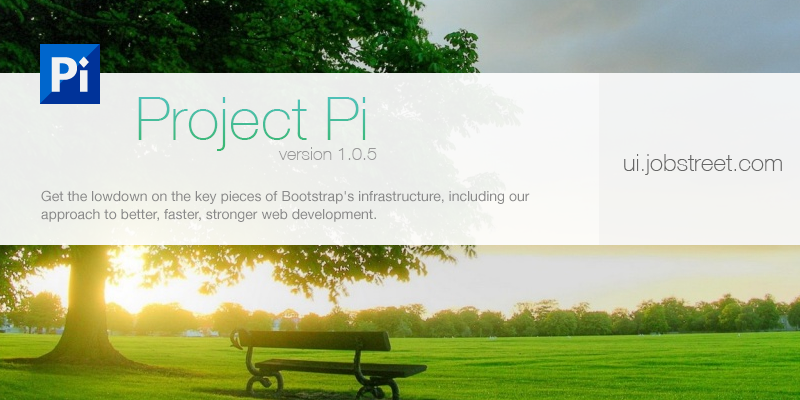
<style>
.page{position:relative;width:800px;height:400px}
.page>*{position:absolute;margin:0}
.t1{font:60px "HelveticaNeueCE-Thin"}
.t2{font:18px "HelveticaNeueCE-Thin";color:#999999}
.t3{font:24px "HelveticaNeueCE-Thin";color:#666666}
.t4{font:14px/18px "HelveticaNeue";color:#898989}
</style>
<div class="page">
<p class="t1" style="left:138px;top:97px;width:228px;height:54px">Project Pi</p>
<p class="t2" style="left:278px;top:147px;width:99px;height:13px">version 1.0.5</p>
<p class="t3" style="left:624px;top:154px;width:158px;height:21px">ui.jobstreet.com</p>
<p class="t4" style="left:41px;top:190px;width:489px;height:32px">Get the lowdown on the key pieces of Bootstrap's infrastructure, including our approach to better, faster, stronger web development.</p>
</div>
